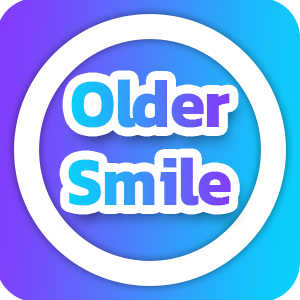
<style>
.page{position:relative;width:300px;height:300px;background:#ffffff}
.page>*{position:absolute;margin:0}
.t1{font:70.4px/78px "Kanit-Bold";letter-spacing:-0.01em;scale:0.91 1}
</style>
<div class="page">
<p class="t1" style="left:68px;top:79px;width:163px;height:127px;text-align:center">Older<br>Smile</p>
</div>
